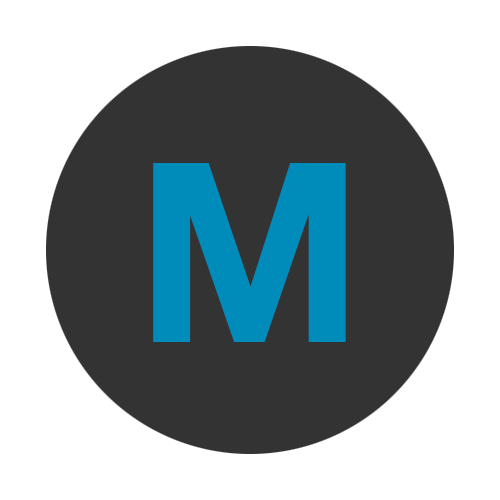
<style>
.page{position:relative;width:500px;height:500px;background:#ffffff}
.page>*{position:absolute;margin:0}
.t1{font:250px "HelveticaNeue-Bold";color:#008cba}
</style>
<div class="page">
<p class="t1" style="left:153px;top:163px;width:193px;height:179px">M</p>
</div>
